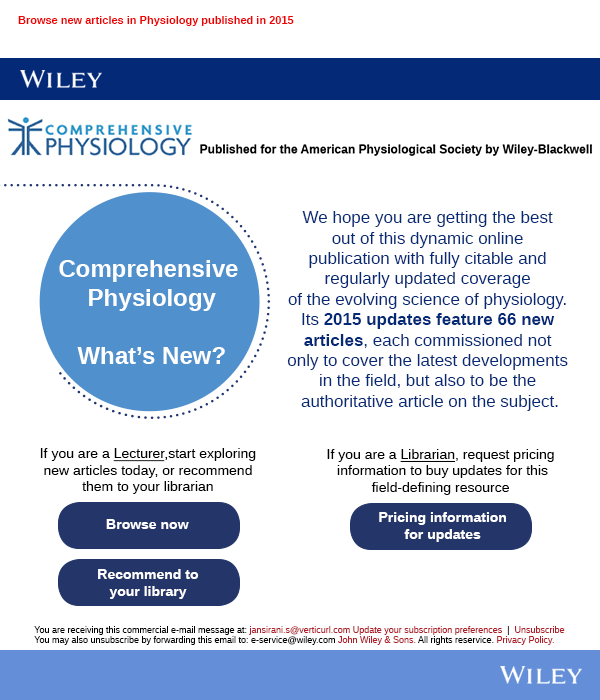
<style>
.page{position:relative;width:600px;height:700px;background:#ffffff}
.page>*{position:absolute;margin:0}
.t1{font:11px "LiberationSans-Bold";color:#f00000}
.t2{font:17px "LiberationSans";color:#032977}
.t3{font:17px "LiberationSans-Bold";color:#032977}
.t4{font:24px "LiberationSans-Bold";color:#ffffff}
.t5{font:14px "LiberationSans";color:#000000}
.t6{font:14px "LiberationSans";color:#000000;text-decoration:underline}
.t7{font:14px "LiberationSans-Bold";color:#ffffff}
.t8{font:9px "LiberationSans";color:#000000}
.t9{font:9px "LiberationSans";color:#b01e29}
</style>
<div class="page">
<p class="t1" style="left:18px;top:16px;width:276px;height:10px">Browse new articles in Physiology published in 2015</p>
<p class="t2" style="left:287px;top:211px;width:281px;height:200px;text-align:center">We hope you are getting the best <br>out of this dynamic online <br>publication with fully citable and <br>regularly updated coverage <br>of the evolving science of physiology. <br>Its <span class="t3">2015 updates feature 66 new <br>articles</span>, each commissioned not <br>only to cover the latest developments <br>in the field, but also to be the <br>authoritative article on the subject.</p>
<p class="t4" style="left:59px;top:260px;width:179px;height:104px;text-align:center">Comprehensive <br>Physiology<br><br>What’s New?</p>
<p class="t5" style="left:40px;top:448px;width:216px;height:46px;text-align:center">If you are a <span class="t6">Lecturer</span>,start exploring <br>new articles today, or recommend <br>them to your librarian</p>
<p class="t5" style="left:327px;top:449px;width:227px;height:46px;text-align:center">If you are a <span class="t6">Librarian</span>, request pricing <br>information to buy updates for this<br>field-defining resource</p>
<p class="t7" style="left:106px;top:519px;width:83px;height:10px">Browse now</p>
<p class="t7" style="left:379px;top:512px;width:127px;height:30px;text-align:center">Pricing information<br>for updates</p>
<p class="t7" style="left:98px;top:569px;width:101px;height:30px;text-align:center">Recommend to<br>your library</p>
<p class="t8" style="left:34px;top:626px;width:531px;height:19px">You are receiving this commercial e-mail message at:<span class="t9"> jansirani.s@verticurl.com Update your subscription preferences</span>  |  <span class="t9">Unsubscribe</span><br>You may also unsubscribe by forwarding this email to: e-service@wiley.com <span class="t9">John Wiley &amp; Sons. </span>All rights reservice.<span class="t9"> Privacy Policy.</span></p>
</div>
